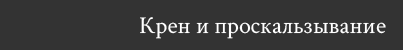
<style>
.page{position:relative;width:403px;height:50px;background:#333333}
.page>*{position:absolute;margin:0}
.t1{font:24px "CrimsonText-Regular";color:#ffffff}
</style>
<div class="page">
<p class="t1" style="left:140px;top:17px;width:246px;height:22px">Крен и проскальзывание</p>
</div>
